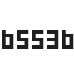
<style>
.page{position:relative;width:74px;height:74px;background:#ffffff}
.page>*{position:absolute;margin:0}
.t1{font:30px "04b24";color:#1f1f1f}
</style>
<div class="page">
<p class="t1" style="left:2px;top:30px;width:72px;height:19px">65536</p>
</div>
